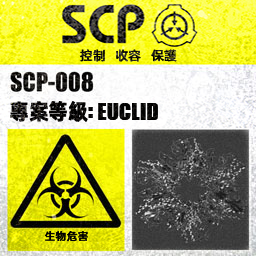
<style>
.page{position:relative;width:256px;height:256px}
.page>*{position:absolute;margin:0}
.t1{font:13px "AlibabaPuHuiTiM"}
.t2{font:26px "URWImpactW01-Bold";letter-spacing:0.02em;color:#000000}
.t3{font:22px "AlibabaPuHuiTiB";letter-spacing:-0.02em;color:#000000;font-weight:bold;scale:0.9 1}
.t4{font:31px "URWImpactW01-Bold";color:#000000}
.t5{font:11px "AlibabaPuHuiTiM";letter-spacing:0.02em;color:#000000}
</style>
<div class="page">
<p class="t1" style="left:80px;top:49px;width:97px;height:13px">控制   收容   保護</p>
<p class="t2" style="left:10px;top:101px;width:148px;height:21px"><span class="t3">專案等級</span><span class="t4">: </span>EUCLID</p>
<p class="t5" style="left:45px;top:231px;width:43px;height:11px">生物危害</p>
</div>
